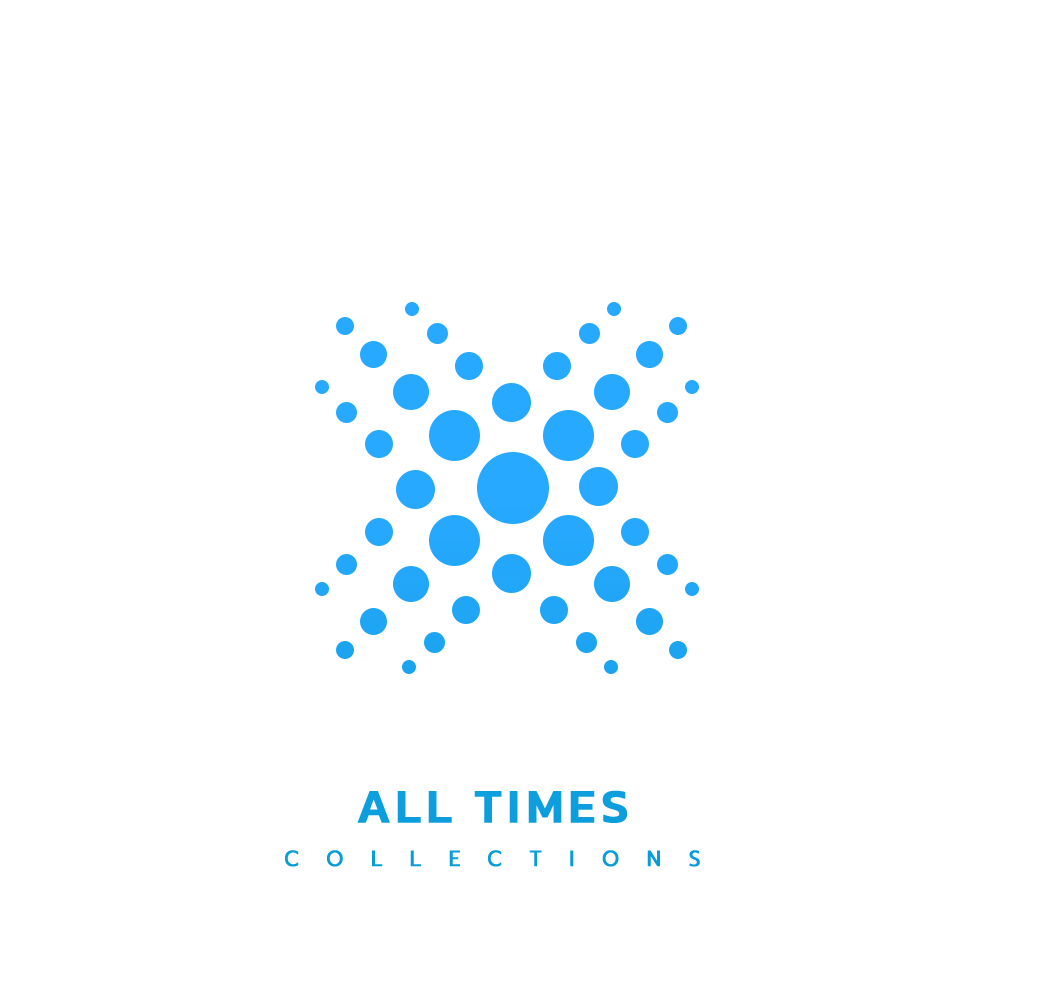
<style>
.page{position:relative;width:1060px;height:1000px;background:#ffffff}
.page>*{position:absolute;margin:0}
.t1{font:48px "Kanit-Medium";letter-spacing:0.1em;color:#0d9edd;font-weight:bold}
.t2{font:22px "Prompt-Regular";letter-spacing:1.32em;color:#099cd7;font-weight:bold;scale:0.93 1}
</style>
<div class="page">
<p class="t1" style="left:357px;top:790px;width:270px;height:33px">ALL TIMES</p>
<p class="t2" style="left:285px;top:850px;width:415px;height:17px">COLLECTIONS</p>
</div>
